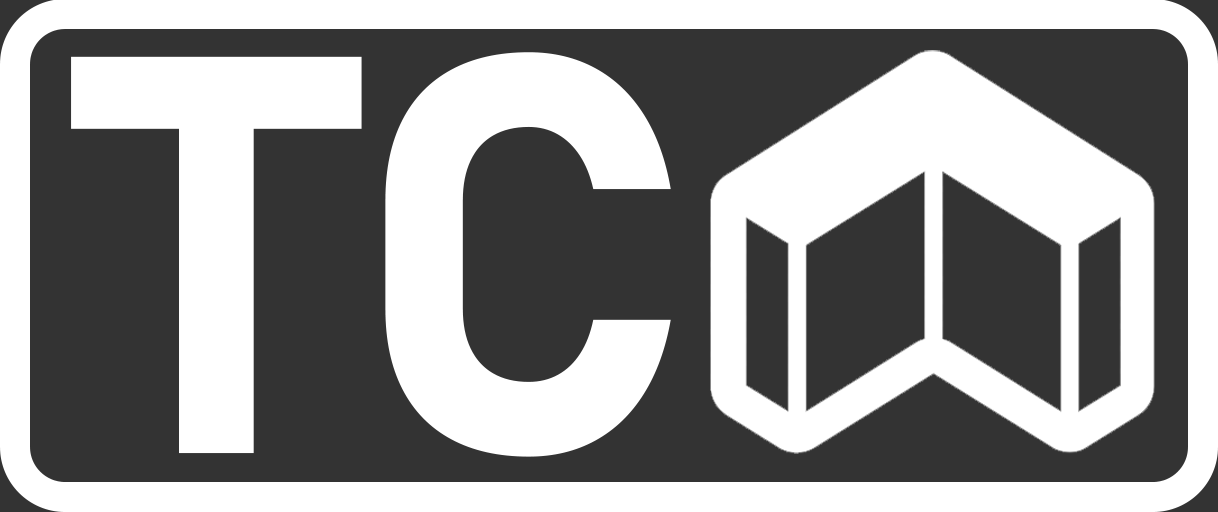
<style>
.page{position:relative;width:1218px;height:512px;background:#333333}
.page>*{position:absolute;margin:0}
.t1{font:557.8px "Bahnschrift-Bold";color:#ffffff}
</style>
<div class="page">
<p class="t1" style="left:71px;top:52px;width:600px;height:405px">TC</p>
</div>
